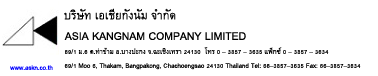
<style>
.page{position:relative;width:378px;height:76px;background:#ffffff}
.page>*{position:absolute;margin:0}
.t1{font:16px "BrowalliaNew";color:#000000}
.t2{font:9.3px "BrowalliaNew";color:#000000}
.t3{font:9.3px "BrowalliaNew";color:#0000ff}
</style>
<div class="page">
<p class="t1" style="left:64px;top:8px;width:112px;height:12px">บริษัท เอเชียกังนัม จำกัด</p>
<p class="t1" style="left:64px;top:32px;width:182px;height:8px">ASIA KANGNAM COMPANY LIMITED</p>
<p class="t2" style="left:65px;top:47px;width:264px;height:7px">69/1 ม.6 ต.ท่าข้าม อ.บางปะกง จ.ฉะเชิงเทรา 24130  โทร 0 – 3857 – 3635 แฟ็กซ์ 0 – 3857 – 3634</p>
<p class="t3" style="left:10px;top:65px;width:43px;height:5px">www.askn.co.th</p>
<p class="t2" style="left:64px;top:63px;width:297px;height:7px">69/1 Moo 6, Thakam, Bangpakong, Chachoengsao 24130 Thailand Tel: 66–3857–3635 Fax: 66–3857–3634</p>
</div>
